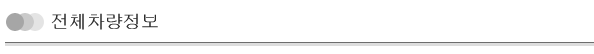
<style>
.page{position:relative;width:594px;height:54px;background:#ffffff}
.page>*{position:absolute;margin:0}
.t1{font:18px "H2gprM";color:#2d2d2d}
</style>
<div class="page">
<p class="t1" style="left:51px;top:13px;width:107px;height:17px">전체차량정보</p>
</div>
